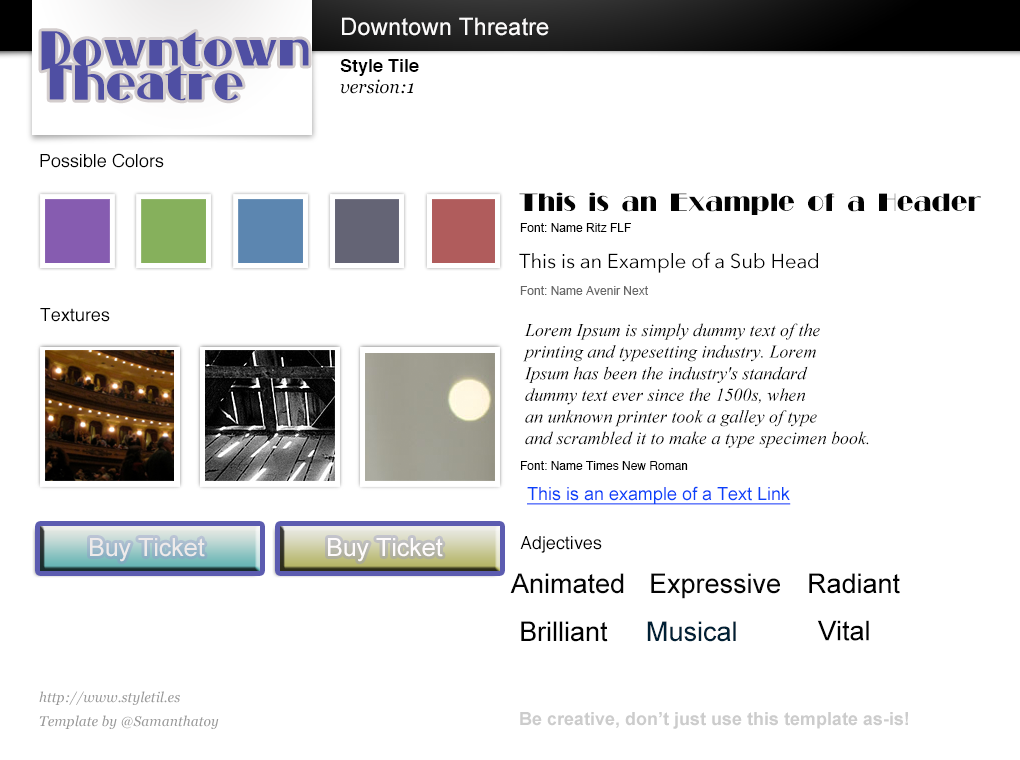
<style>
.page{position:relative;width:1020px;height:760px;background:#ffffff}
.page>*{position:absolute;margin:0}
.t1{font:24px "ArialMT";color:#fbfafa}
.t2{font:45px/34px "StandingRoomOnly";color:#4f4fa3}
.t3{font:12px "ArialMT";color:#000000}
.t4{font:32px "Arial-BoldMT";color:#000000}
.t5{font:25px "RitzFLF";color:#030303}
.t6{font:20px "AvenirNext-Regular";color:#000000}
.t7{font:12px "ArialMT";color:#666666}
.t8{font:14px/24px "Georgia-Italic";color:#000000}
.t9{font:18px "TimesNewRomanPS-ItalicMT";color:#000000}
.t10{font:12px "Helvetica";color:#000000}
.t11{font:18px "ArialMT";color:#0941f9;text-decoration:underline}
.t12{font:25px "ArialMT";color:#eeeaea}
.t13{font:25px "ArialMT";color:#fefbfb}
.t14{font:18px "Helvetica";color:#000000}
.t15{font:27px "ArialMT";color:#050505}
.t16{font:27px "ArialMT";color:#040404}
.t17{font:27px "ArialMT";color:#000000}
.t18{font:27px "ArialMT";color:#002035}
.t19{font:36px "ArialMT";color:#999999}
.t20{font:36px "ArialMT";color:#cccccc}
</style>
<div class="page">
<p class="t1" style="left:342px;top:17px;width:207px;height:19px">Downtown Threatre</p>
<p class="t2" style="left:41px;top:31px;width:268px;height:70px">Downtown<br>Theatre</p>
<p class="t3" style="left:340px;top:79px;width:74px;height:15px">Font: Name #hexcode</p>
<p class="t4" style="left:40px;top:153px;width:124px;height:15px">This is an Example of a Header</p>
<p class="t5" style="left:519px;top:192px;width:462px;height:23px">This is an Example of a Header</p>
<p class="t3" style="left:520px;top:223px;width:111px;height:9px">Font: Name Ritz FLF</p>
<p class="t6" style="left:519px;top:252px;width:299px;height:21px">This is an Example of a Sub Head</p>
<p class="t7" style="left:520px;top:286px;width:128px;height:9px">Font: Name Avenir Next</p>
<p class="t8" style="left:40px;top:308px;width:70px;height:14px">http://www.styletil.es<br>Template by @Samanthatoy</p>
<p class="t9" style="left:523px;top:323px;width:346px;height:125px">Lorem Ipsum is simply dummy text of the <br>printing and typesetting industry. Lorem <br>Ipsum has been the industry's standard <br>dummy text ever since the 1500s, when <br>an unknown printer took a galley of type <br>and scrambled it to make a type specimen book.</p>
<p class="t10" style="left:521px;top:461px;width:167px;height:9px">Font: Name Times New Roman</p>
<p class="t11" style="left:527px;top:486px;width:264px;height:19px">This is an example of a Text Link</p>
<p class="t12" style="left:90px;top:538px;width:115px;height:24px">Buy Ticket</p>
<p class="t13" style="left:328px;top:538px;width:115px;height:24px">Buy Ticket</p>
<p class="t14" style="left:520px;top:536px;width:82px;height:17px">Adjectives</p>
<p class="t15" style="left:510px;top:573px;width:114px;height:21px">Animated</p>
<p class="t16" style="left:651px;top:573px;width:129px;height:26px">Expressive</p>
<p class="t17" style="left:809px;top:573px;width:91px;height:21px">Radiant</p>
<p class="t17" style="left:521px;top:621px;width:87px;height:21px">Brilliant</p>
<p class="t18" style="left:647px;top:621px;width:89px;height:21px">Musical</p>
<p class="t17" style="left:817px;top:620px;width:52px;height:21px">Vital</p>
<p class="t19" style="left:39px;top:691px;width:180px;height:38px">Amet</p>
<p class="t20" style="left:520px;top:712px;width:388px;height:17px">Sit</p>
</div>
